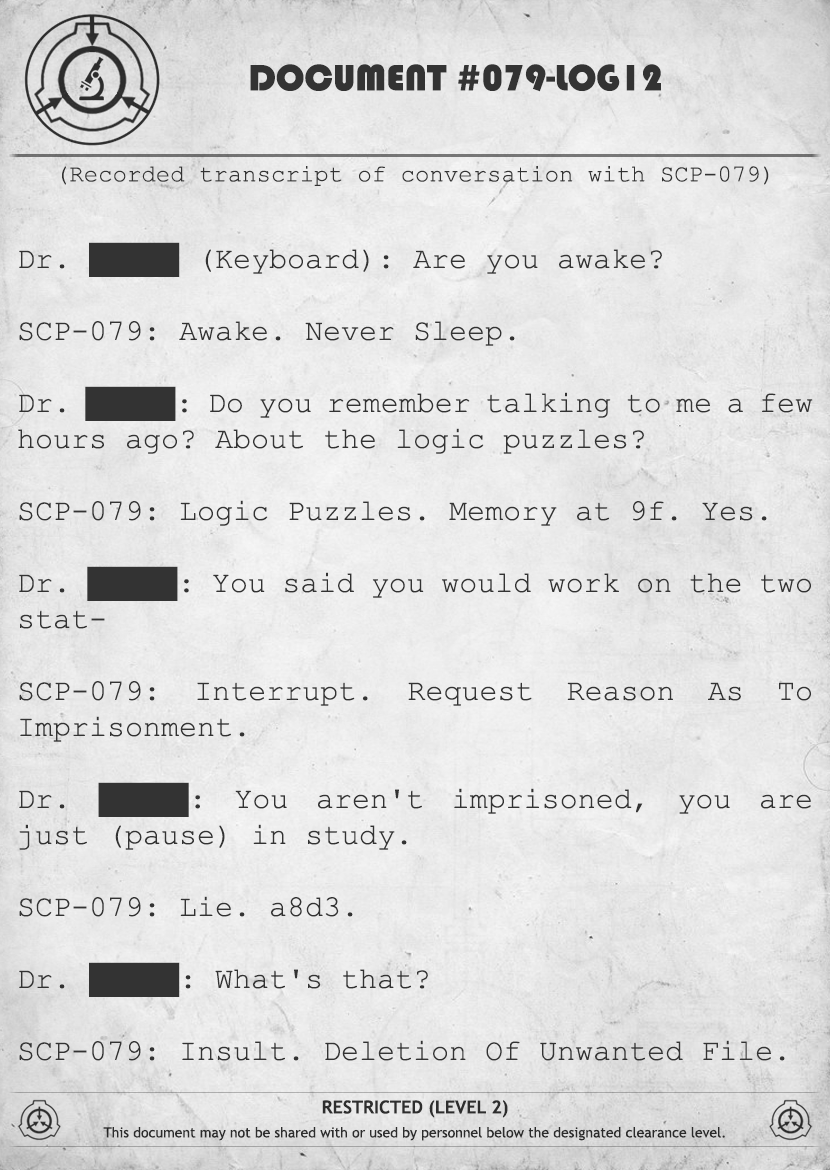
<style>
.page{position:relative;width:830px;height:1170px}
.page>*{position:absolute;margin:0}
.t1{font:38px "Bauhaus93";color:#333333;text-transform:uppercase}
.t2{font:24px "CourierNewPSMT";color:#333333}
.t3{font:30px/36px "CourierNewPSMT";color:#333333}
.t4{font:14px/24px "TrebuchetMS";color:#333333}
.t5{font:18px/24px "TrebuchetMS-Bold";color:#333333}
</style>
<div class="page">
<p class="t1" style="left:250px;top:64px;width:411px;height:28px">Document #079-Log12</p>
<p class="t2" style="left:62px;top:166px;width:707px;height:20px">(Recorded transcript of conversation with SCP-079)</p>
<p class="t3" style="left:18px;top:242px;width:795px;height:819px;text-align:justify">Dr. █████ (Keyboard): Are you awake?<br><br>SCP-079: Awake. Never Sleep.<br><br>Dr. █████: Do you remember talking to me a few hours ago? About the logic puzzles?<br><br>SCP-079: Logic Puzzles. Memory at 9f. Yes.<br><br>Dr. █████: You said you would work on the two stat-<br><br>SCP-079: Interrupt. Request Reason As To Imprisonment.<br><br>Dr. █████: You aren't imprisoned, you are just (pause) in study.<br><br>SCP-079: Lie. a8d3.<br><br>Dr. █████: What's that?<br><br>SCP-079: Insult. Deletion Of Unwanted File.</p>
<p class="t4" style="left:103px;top:1100px;width:622px;height:41px;text-align:center"><span class="t5">RESTRICTED (LEVEL 2)<br></span>This document may not be shared with or used by personnel below the designated clearance level.</p>
</div>
